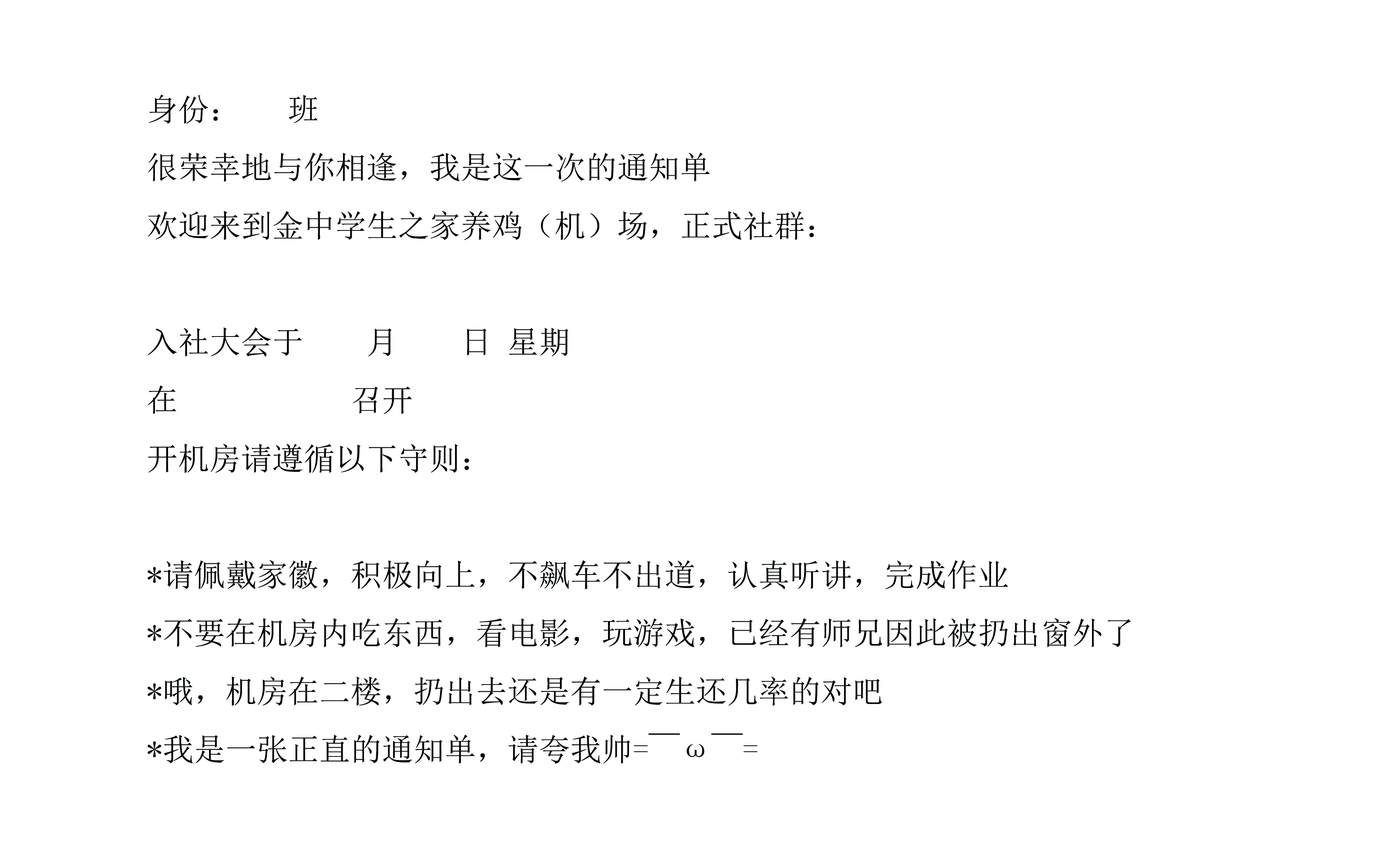
<style>
.page{position:relative;width:1394px;height:855px;background:#ffffff}
.page>*{position:absolute;margin:0}
.t1{font:31.4px/58.2px "SimSun";color:#040606}
</style>
<div class="page">
<p class="t1" style="left:147px;top:95px;width:984px;height:669px">身份：   班<br>很荣幸地与你相逢，我是这一次的通知单<br>欢迎来到金中学生之家养鸡（机）场，正式社群：<br><br>入社大会于    月    日 星期<br>在           召开<br>开机房请遵循以下守则：<br><br>*请佩戴家徽，积极向上，不飙车不出道，认真听讲，完成作业<br>*不要在机房内吃东西，看电影，玩游戏，已经有师兄因此被扔出窗外了<br>*哦，机房在二楼，扔出去还是有一定生还几率的对吧<br>*我是一张正直的通知单，请夸我帅=￣ω￣=</p>
</div>
